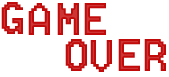
<style>
.page{position:relative;width:169px;height:77px;background:#ffffff}
.page>*{position:absolute;margin:0}
.t1{font:57px "8514oem";color:#c10b0b}
.t2{font:57px "8514oem"}
</style>
<div class="page">
<p class="t1" style="left:1px;top:2px;width:22px;height:32px">G</p>
<p class="t1" style="left:28px;top:3px;width:22px;height:32px">A</p>
<p class="t2" style="left:57px;top:3px;width:22px;height:32px">M</p>
<p class="t1" style="left:84px;top:3px;width:22px;height:32px">E</p>
<p class="t1" style="left:65px;top:39px;width:22px;height:32px">O</p>
<p class="t1" style="left:90px;top:40px;width:22px;height:32px">V</p>
<p class="t1" style="left:118px;top:39px;width:22px;height:32px">E</p>
<p class="t1" style="left:144px;top:39px;width:22px;height:32px">R</p>
</div>
